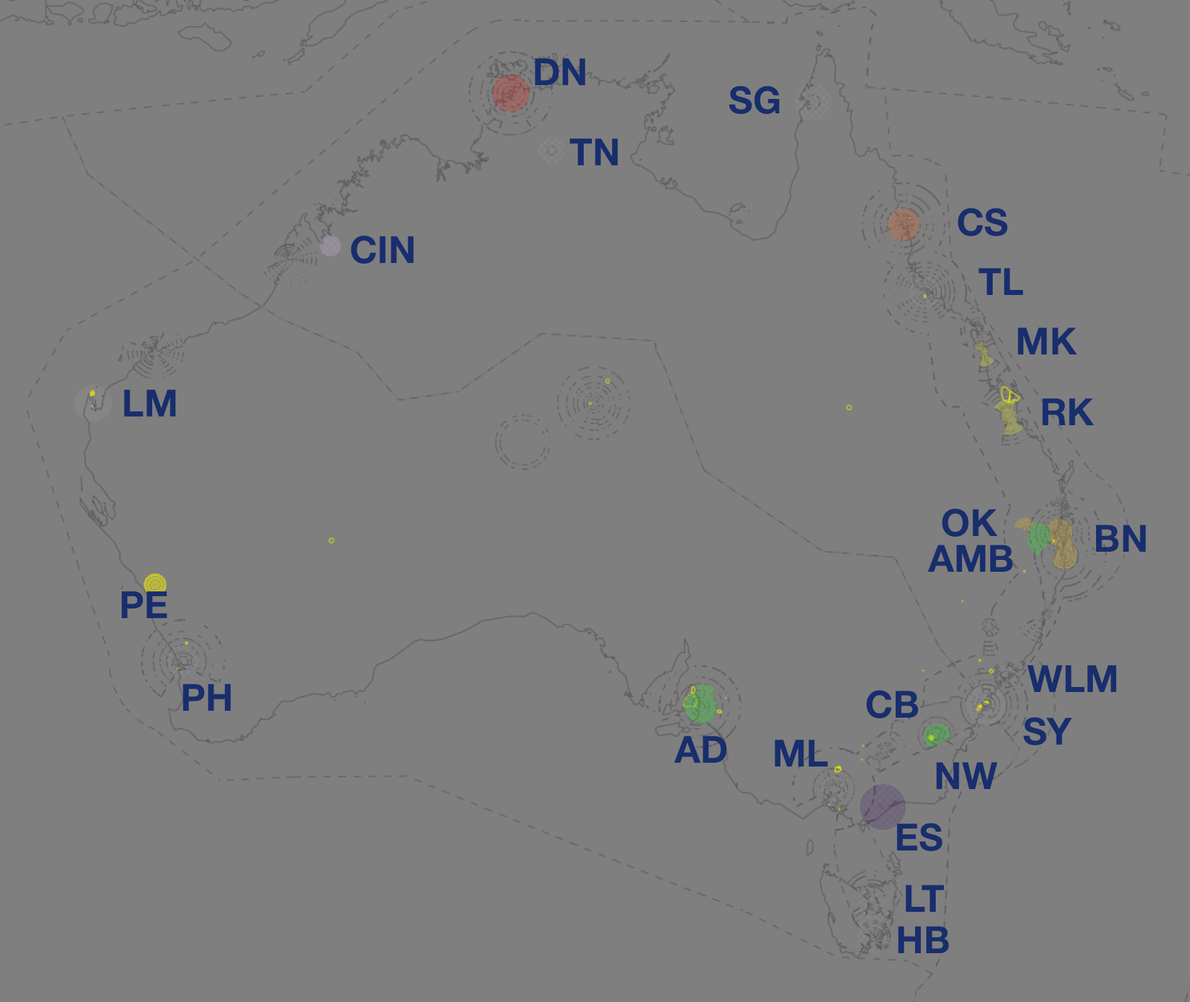
<style>
.page{position:relative;width:1190px;height:1002px;background:#7f7f7f}
.page>*{position:absolute;margin:0}
.t1{font:37.6px "HelveticaNeue-Bold";color:#182e6d}
</style>
<div class="page">
<p class="t1" style="left:535px;top:58px;width:51px;height:27px">DN</p>
<p class="t1" style="left:729px;top:86px;width:51px;height:28px">SG</p>
<p class="t1" style="left:569px;top:138px;width:49px;height:27px">TN</p>
<p class="t1" style="left:958px;top:208px;width:50px;height:28px">CS</p>
<p class="t1" style="left:351px;top:235px;width:63px;height:29px">CIN</p>
<p class="t1" style="left:978px;top:268px;width:45px;height:27px">TL</p>
<p class="t1" style="left:1018px;top:328px;width:59px;height:26px">MK</p>
<p class="t1" style="left:124px;top:390px;width:52px;height:26px">LM</p>
<p class="t1" style="left:1042px;top:398px;width:52px;height:27px">RK</p>
<p class="t1" style="left:942px;top:509px;width:56px;height:28px">OK</p>
<p class="t1" style="left:1096px;top:525px;width:50px;height:27px">BN</p>
<p class="t1" style="left:928px;top:545px;width:85px;height:27px">AMB</p>
<p class="t1" style="left:122px;top:591px;width:45px;height:27px">PE</p>
<p class="t1" style="left:1027px;top:665px;width:90px;height:27px">WLM</p>
<p class="t1" style="left:183px;top:684px;width:48px;height:27px">PH</p>
<p class="t1" style="left:866px;top:690px;width:52px;height:28px">CB</p>
<p class="t1" style="left:1023px;top:717px;width:49px;height:28px">SY</p>
<p class="t1" style="left:674px;top:736px;width:53px;height:27px">AD</p>
<p class="t1" style="left:775px;top:740px;width:53px;height:27px">ML</p>
<p class="t1" style="left:936px;top:762px;width:62px;height:27px">NW</p>
<p class="t1" style="left:897px;top:823px;width:46px;height:28px">ES</p>
<p class="t1" style="left:906px;top:885px;width:38px;height:27px">LT</p>
<p class="t1" style="left:898px;top:926px;width:51px;height:27px">HB</p>
</div>
